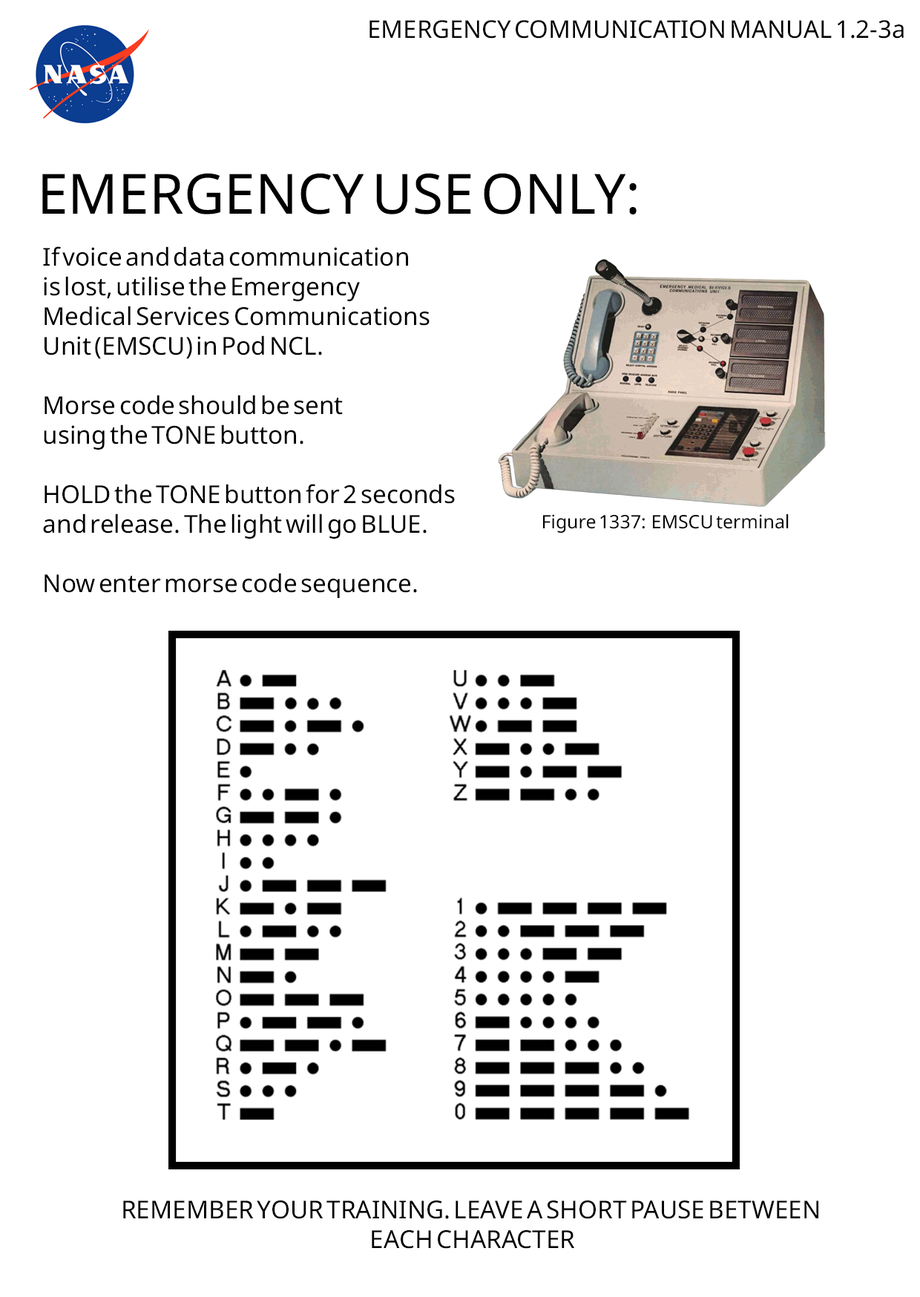
<style>
.page{position:relative;width:920px;height:1297px;background:#ffffff}
.page>*{position:absolute;margin:0}
.t1{font:24.4px "SansSerifCollection";color:#000000}
.t2{font:55.6px "SansSerifCollection";color:#000000}
.t3{font:24.7px "SansSerifCollection";color:#000000}
.t4{font:18.5px "SansSerifCollection";color:#000000}
</style>
<div class="page">
<p class="t1" style="left:369px;top:20px;width:534px;height:19px">EMERGENCY COMMUNICATION MANUAL 1.2-3a</p>
<p class="t2" style="left:42px;top:173px;width:594px;height:41px">EMERGENCY USE ONLY:</p>
<p class="t3" style="left:43px;top:246px;width:412px;height:352px">If voice and data communication<br>is lost, utilise the Emergency<br>Medical Services Communications<br>Unit (EMSCU) in Pod NCL.<br><br>Morse code should be sent<br>using the TONE button.<br><br>HOLD the TONE button for 2 seconds<br>and release. The light will go BLUE.<br><br>Now enter morse code sequence.</p>
<p class="t4" style="left:543px;top:514px;width:245px;height:19px">Figure 1337:  EMSCU terminal</p>
<p class="t3" style="left:123px;top:1199px;width:695px;height:49px;text-align:center">REMEMBER YOUR TRAINING. LEAVE A SHORT PAUSE BETWEEN <br>EACH CHARACTER</p>
</div>
